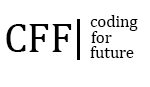
<style>
.page{position:relative;width:150px;height:87px;background:#ffffff}
.page>*{position:absolute;margin:0}
.t1{font:16.7px "Cambria";color:#000000}
.t2{font:41.7px "Cambria";color:#000000}
</style>
<div class="page">
<p class="t1" style="left:90px;top:15px;width:48px;height:16px">coding</p>
<p class="t2" style="left:6px;top:24px;width:66px;height:28px">CFF</p>
<p class="t1" style="left:91px;top:31px;width:21px;height:12px">for</p>
<p class="t1" style="left:90px;top:46px;width:44px;height:12px">future</p>
</div>
